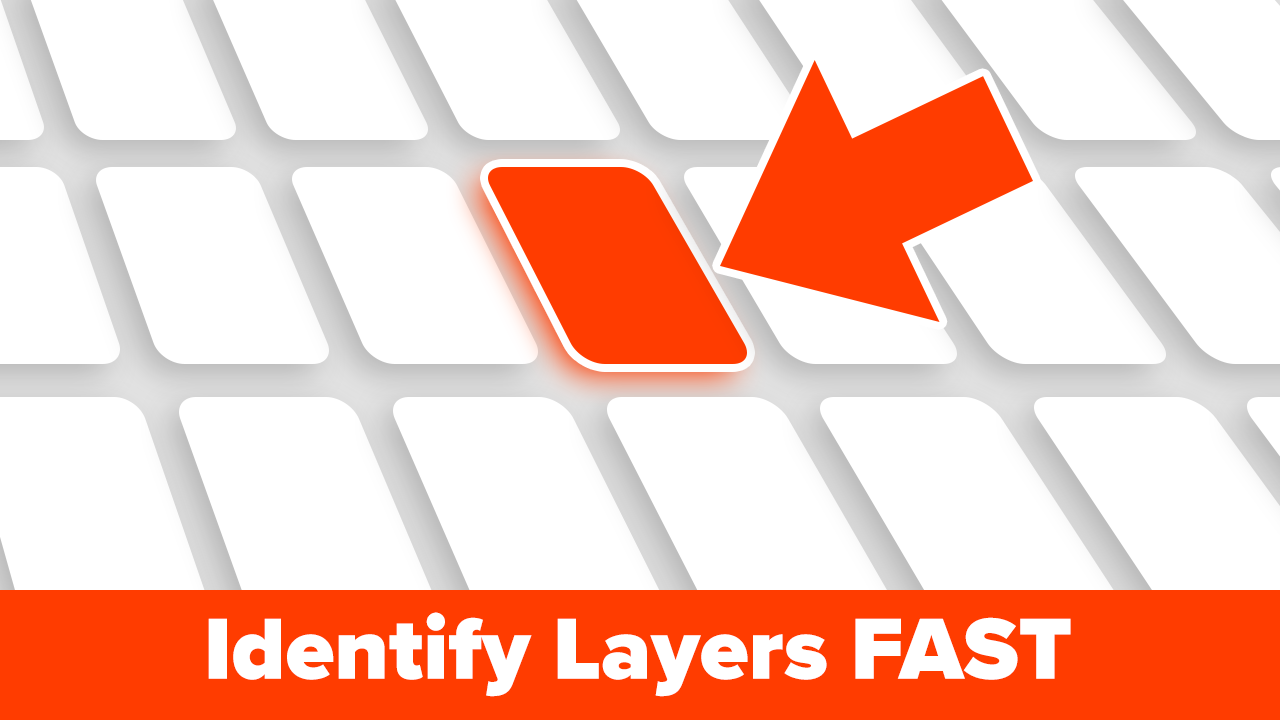
<style>
.page{position:relative;width:1280px;height:720px;background:#ffffff}
.page>*{position:absolute;margin:0}
.t1{font:90px "ProximaNova-Black";color:#ffffff}
</style>
<div class="page">
<p class="t1" style="left:208px;top:612px;width:863px;height:85px">Identify Layers FAST</p>
</div>
